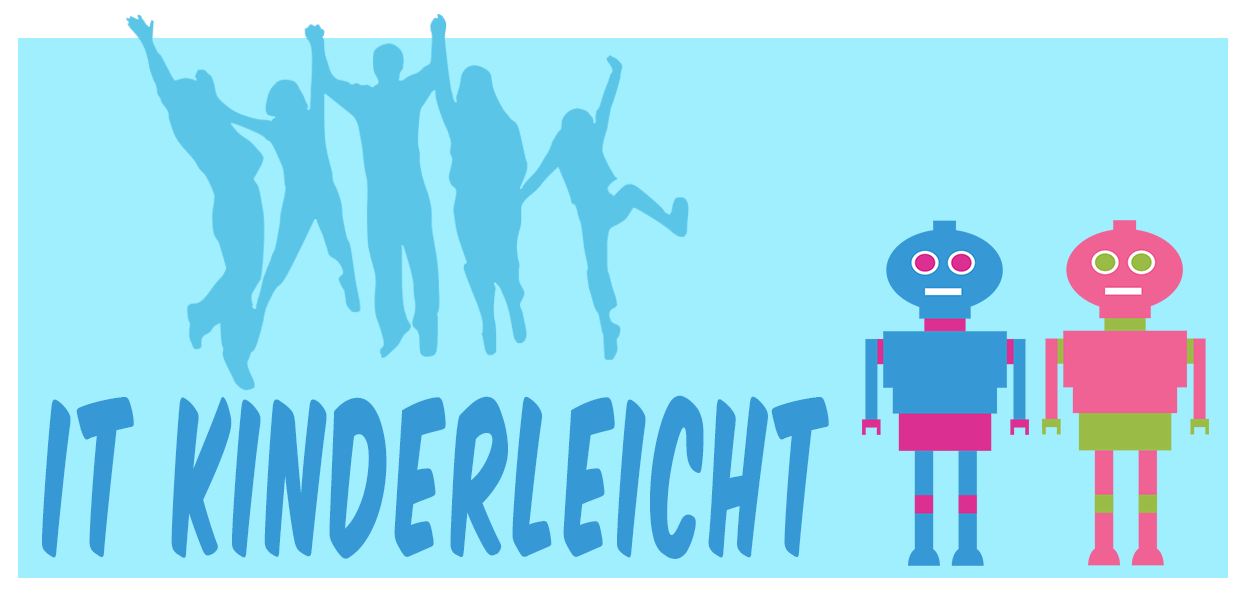
<style>
.page{position:relative;width:1240px;height:594px;background:#a0efff}
.page>*{position:absolute;margin:0}
.t1{font:180px "KomikaAxis";letter-spacing:0.1em;color:#3699d5;scale:0.44 1}
</style>
<div class="page">
<p class="t1" style="left:42px;top:395px;width:787px;height:164px">IT kinderleicht</p>
</div>
